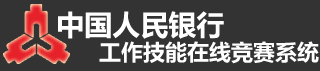
<style>
.page{position:relative;width:320px;height:71px;background:#333333}
.page>*{position:absolute;margin:0}
.t1{font:28px "MicrosoftYaHei-Bold";color:#ffffff}
.t2{font:22px "MicrosoftYaHei-Bold";color:#ffffff}
</style>
<div class="page">
<p class="t1" style="left:58px;top:11px;width:166px;height:28px">中国人民银行</p>
<p class="t2" style="left:99px;top:41px;width:220px;height:23px">工作技能在线竞赛系统</p>
</div>
